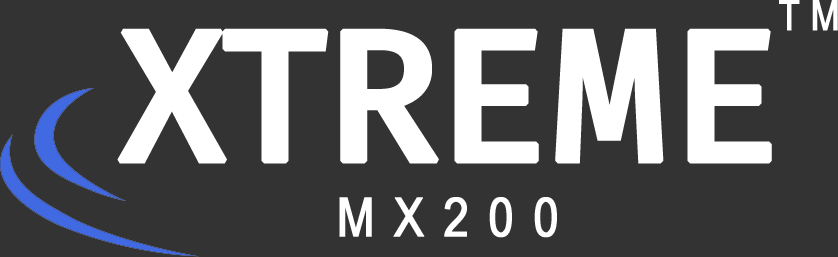
<style>
.page{position:relative;width:838px;height:257px;background:#333333}
.page>*{position:absolute;margin:0}
.t1{font:41.7px "ArialNarrow";letter-spacing:0.25em;color:#ffffff;font-weight:bold}
.t2{font:187.5px "FiraCode-Medium";color:#ffffff;font-weight:bold}
.t3{font:54.2px "ArialNarrow";letter-spacing:0.35em;color:#ffffff;font-weight:bold}
</style>
<div class="page">
<p class="t1" style="left:779px;top:0px;width:59px;height:31px">TM</p>
<p class="t2" style="left:117px;top:28px;width:655px;height:136px">XTREME</p>
<p class="t3" style="left:339px;top:197px;width:218px;height:41px">MX200</p>
</div>
